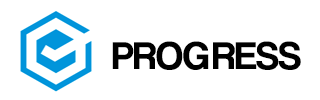
<style>
.page{position:relative;width:320px;height:100px;background:#ffffff}
.page>*{position:absolute;margin:0}
.t1{font:40px "CoolveticaRg-Regular";color:#000000}
</style>
<div class="page">
<p class="t1" style="left:112px;top:41px;width:189px;height:29px">PROGRESS</p>
</div>
